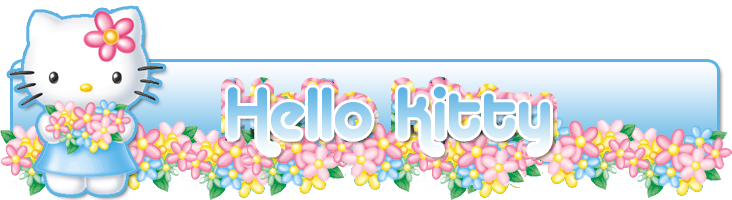
<style>
.page{position:relative;width:732px;height:200px;background:#ffffff}
.page>*{position:absolute;margin:0}
.t1{font:72px "Alba"}
</style>
<div class="page">
<p class="t1" style="left:228px;top:83px;width:322px;height:69px">Hello Kitty</p>
<p class="t1" style="left:228px;top:86px;width:322px;height:69px">Hello Kitty</p>
</div>
